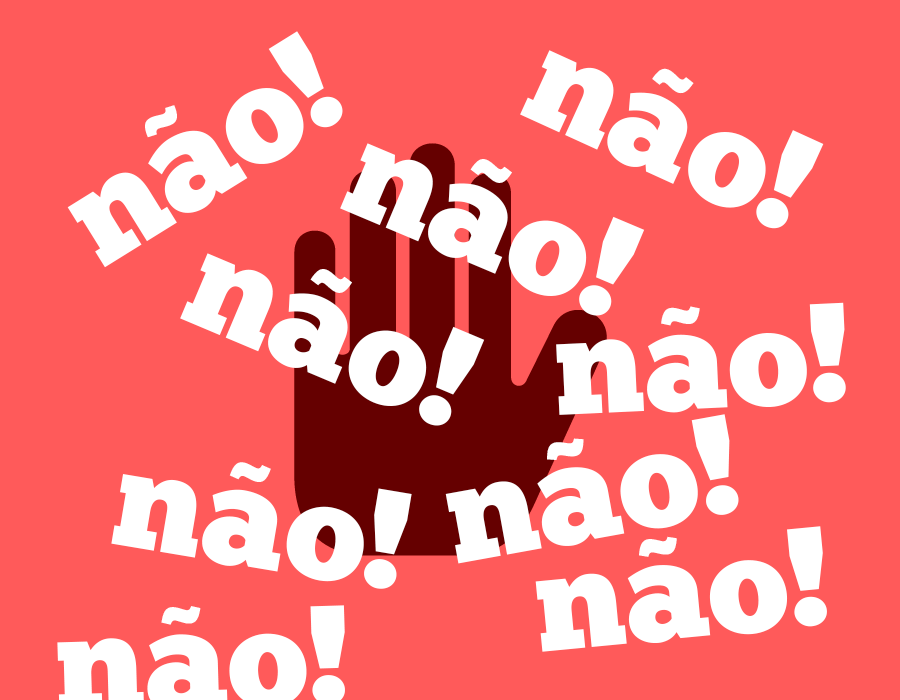
<style>
.page{position:relative;width:900px;height:700px;background:#ff5a5a}
.page>*{position:absolute;margin:0}
.t1{font:141px "ChunkFive-Roman";color:#ffffff}
.t2{font:92.7px "GothamUltra";color:#ffffff}
</style>
<div class="page">
<p class="t1" style="left:67px;top:31px;width:276px;height:237px;rotate:-32deg">nao!</p>
<p class="t1" style="left:520px;top:50px;width:304px;height:179px;rotate:25deg">nao!</p>
<p class="t2" style="left:652px;top:68px;width:42px;height:26px;rotate:25deg">~</p>
<p class="t2" style="left:145px;top:105px;width:32px;height:33px;rotate:-32deg">~</p>
<p class="t1" style="left:340px;top:143px;width:305px;height:173px;rotate:23deg">nao!</p>
<p class="t2" style="left:470px;top:159px;width:42px;height:24px;rotate:23deg">~</p>
<p class="t1" style="left:180px;top:253px;width:305px;height:173px;rotate:23deg">nao!</p>
<p class="t2" style="left:310px;top:269px;width:42px;height:24px;rotate:23deg">~</p>
<p class="t1" style="left:556px;top:302px;width:290px;height:113px;rotate:-3deg">nao!</p>
<p class="t2" style="left:661px;top:306px;width:39px;height:20px;rotate:-3deg">~</p>
<p class="t1" style="left:445px;top:414px;width:294px;height:150px;rotate:-10deg">nao!</p>
<p class="t2" style="left:547px;top:438px;width:37px;height:22px;rotate:-10deg">~</p>
<p class="t2" style="left:229px;top:462px;width:42px;height:20px;rotate:10deg">~</p>
<p class="t1" style="left:111px;top:474px;width:301px;height:115px;rotate:10deg">nao!</p>
<p class="t1" style="left:535px;top:526px;width:292px;height:126px;rotate:-5deg">nao!</p>
<p class="t2" style="left:639px;top:536px;width:38px;height:21px;rotate:-5deg">~</p>
<p class="t2" style="left:161px;top:606px;width:40px;height:19px;rotate:-2deg">~</p>
</div>
